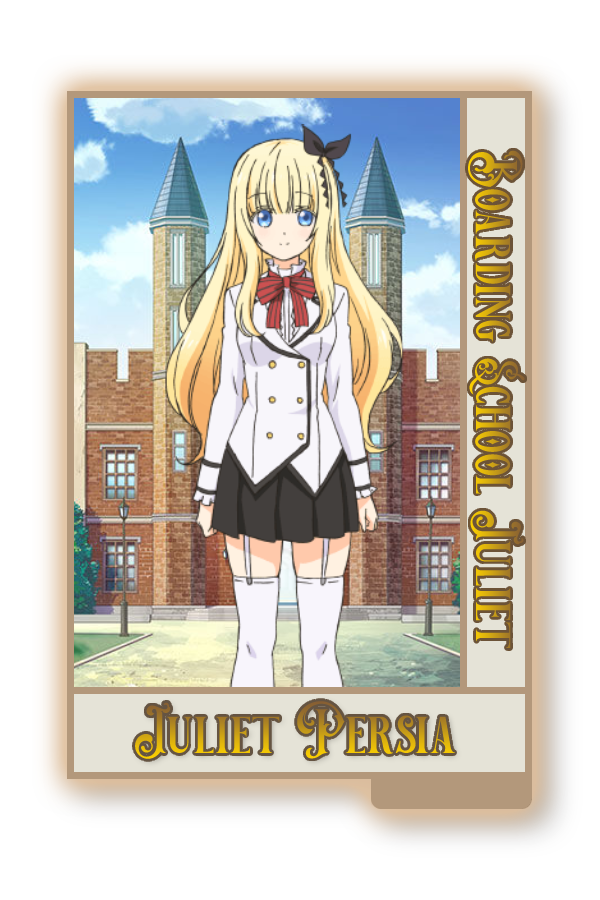
<style>
.page{position:relative;width:600px;height:900px;background:#ffffff}
.page>*{position:absolute;margin:0}
.t1{font:58.9px "VictorianDecadeDemoVersion"}
.t2{font:62.3px "VictorianDecadeDemoVersion"}
</style>
<div class="page">
<p class="t1" style="left:468px;top:150px;width:57px;height:498px;rotate:90deg">Boarding School Juliet</p>
<p class="t2" style="left:133px;top:701px;width:323px;height:58px">Juliet Persia</p>
</div>
